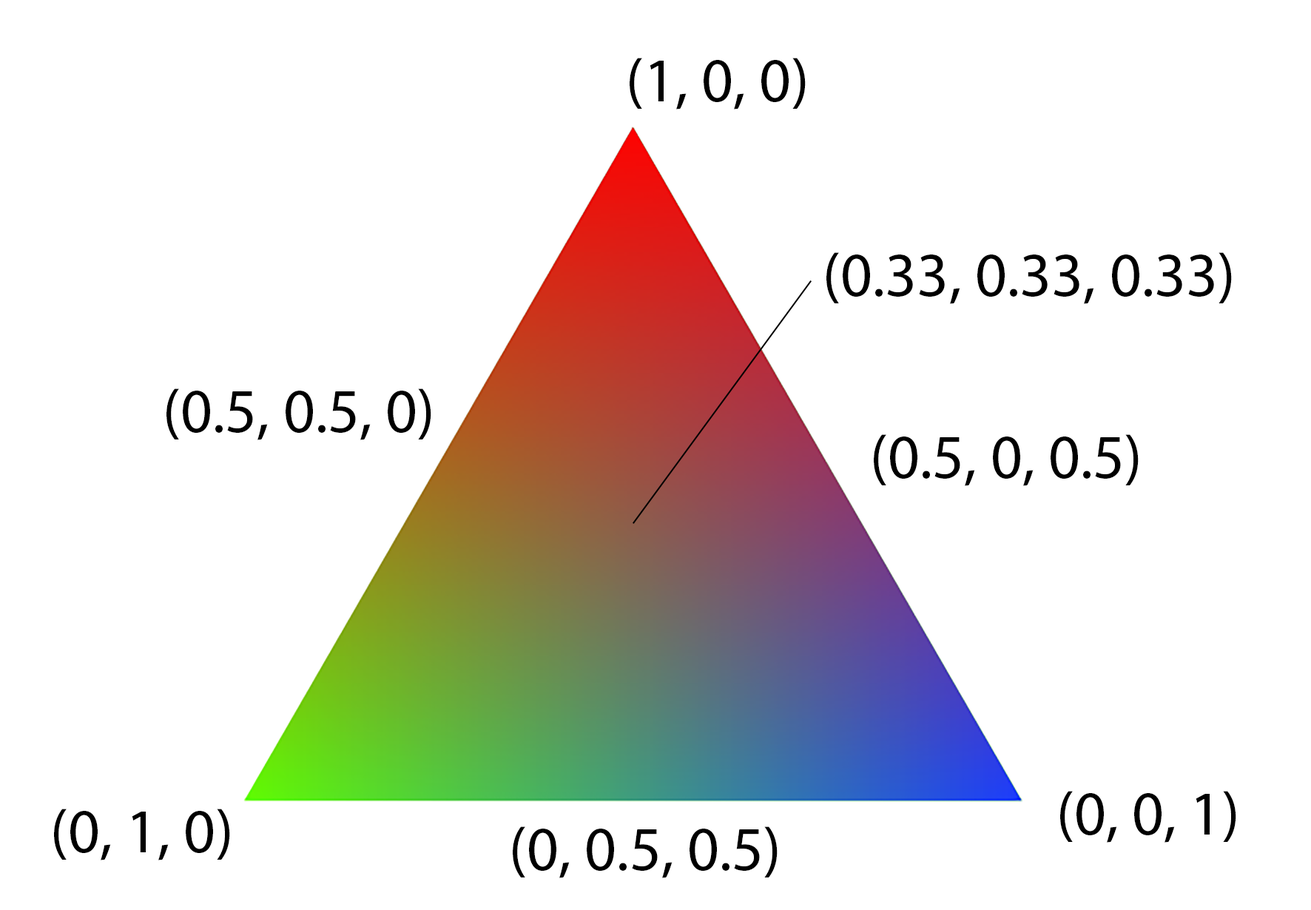
<style>
.page{position:relative;width:1311px;height:910px;background:#ffffff}
.page>*{position:absolute;margin:0}
.t1{font:62.1px "MyriadPro-Regular";color:#000000}
</style>
<div class="page">
<p class="t1" style="left:629px;top:58px;width:176px;height:51px">(1, 0, 0)</p>
<p class="t1" style="left:826px;top:252px;width:406px;height:52px">(0.33, 0.33, 0.33)</p>
<p class="t1" style="left:166px;top:388px;width:265px;height:52px">(0.5, 0.5, 0)</p>
<p class="t1" style="left:874px;top:434px;width:264px;height:52px">(0.5, 0, 0.5)</p>
<p class="t1" style="left:1060px;top:791px;width:176px;height:51px">(0, 0, 1)</p>
<p class="t1" style="left:54px;top:808px;width:176px;height:52px">(0, 1, 0)</p>
<p class="t1" style="left:513px;top:826px;width:264px;height:52px">(0, 0.5, 0.5)</p>
</div>
